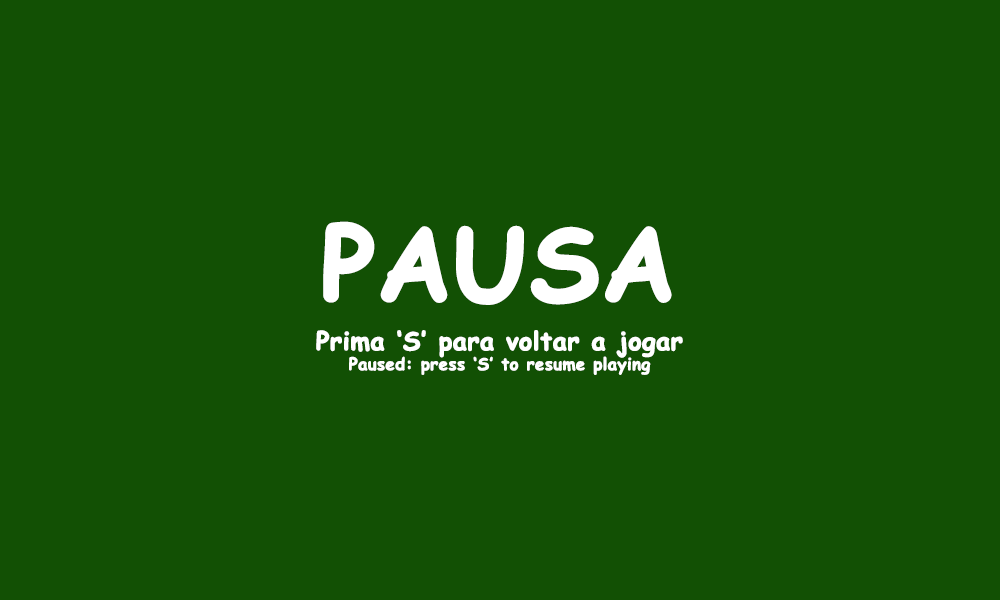
<style>
.page{position:relative;width:1000px;height:600px;background:#125004}
.page>*{position:absolute;margin:0}
.t1{font:100px "ComicSansMS-Bold";color:#ffffff;font-weight:bold}
.t2{font:16.7px "ComicSansMS-Bold";color:#ffffff;font-weight:bold}
.t3{font:25px "ComicSansMS-Bold";color:#ffffff;font-weight:bold}
</style>
<div class="page">
<p class="t1" style="left:323px;top:221px;width:349px;height:84px">PAUSA</p>
<p class="t2" style="left:316px;top:330px;width:367px;height:45px;text-align:center"><span class="t3">Prima ‘S’ para voltar a jogar<br></span>Paused: press ‘S’ to resume playing</p>
</div>
